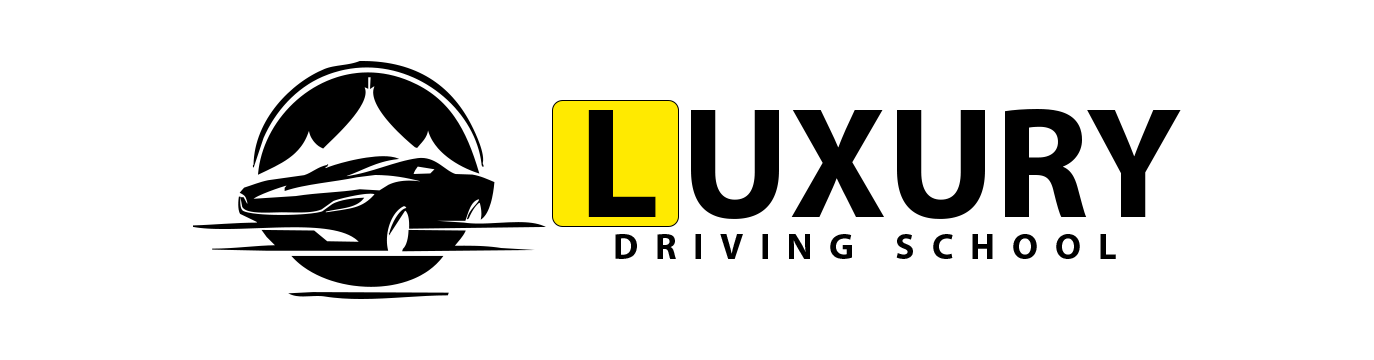
<style>
.page{position:relative;width:1374px;height:360px;background:#ffffff}
.page>*{position:absolute;margin:0}
.t1{font:158.8px "MyriadPro-Bold";color:#000000}
.t2{font:158.8px "MyriadPro-Bold";letter-spacing:0.14em;color:#000000}
.t3{font:36.5px "MyriadPro-Bold";letter-spacing:0.46em;color:#000000}
</style>
<div class="page">
<p class="t1" style="left:588px;top:109px;width:593px;height:110px"><span class="t2">L</span>UXURY</p>
<p class="t3" style="left:615px;top:234px;width:501px;height:25px">DRIVING SCHOOL</p>
</div>
